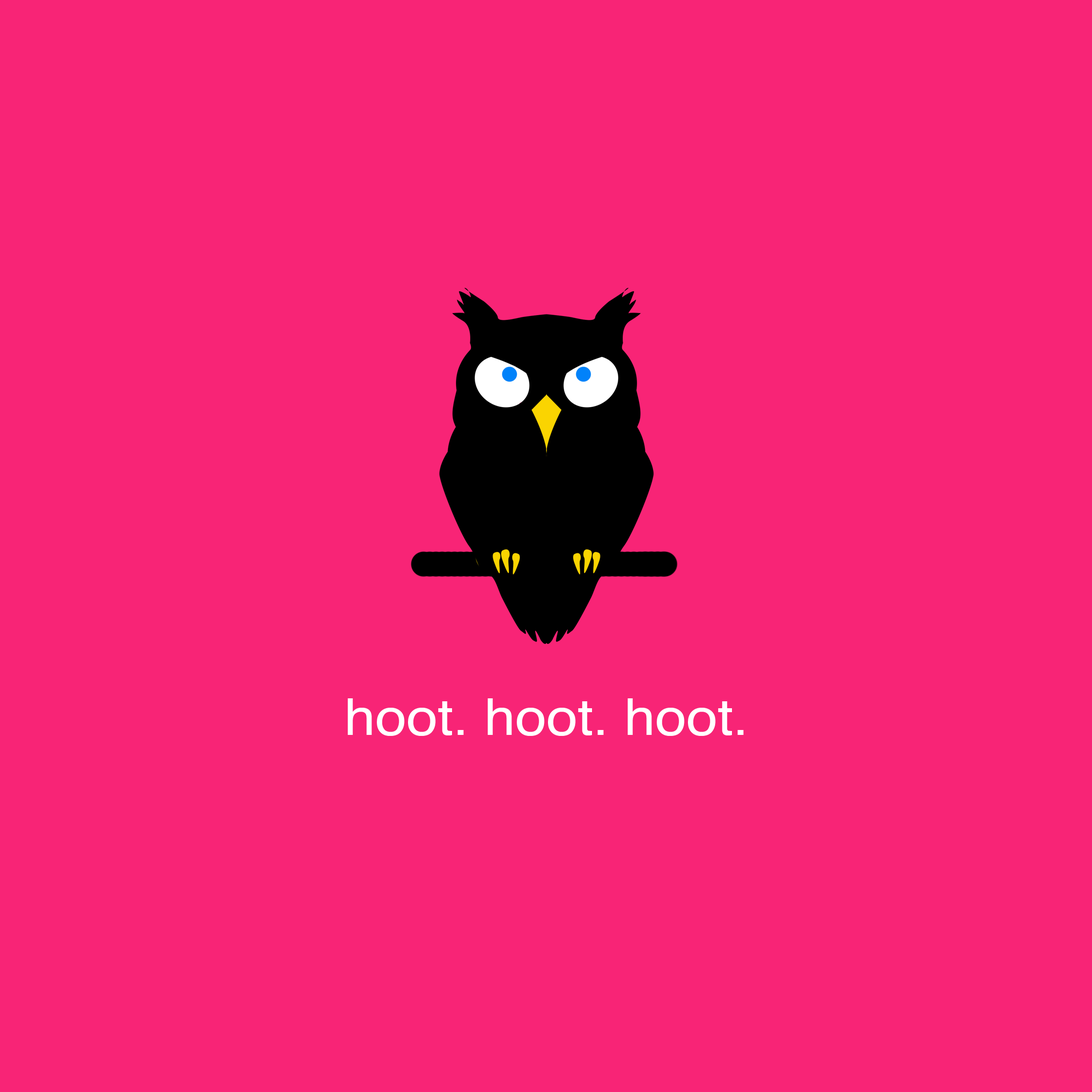
<style>
.page{position:relative;width:1092px;height:1092px;background:#f82476}
.page>*{position:absolute;margin:0}
.t1{font:50.1px "Helvetica";color:#ffffff;scale:1.12 1}
</style>
<div class="page">
<p class="t1" style="left:348px;top:698px;width:396px;height:38px">hoot. hoot. hoot.</p>
</div>
